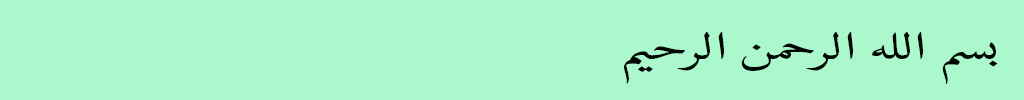
<style>
.page{position:relative;width:1024px;height:100px;background:#acf8cd}
.page>*{position:absolute;margin:0}
.t1{font:46.7px "AdobeNaskh-Medium";color:#000703;scale:1.43 1}
</style>
<div class="page">
<p class="t1" style="left:624px;top:31px;width:374px;height:54px">بسم الله الرحمن الرحيم</p>
</div>
